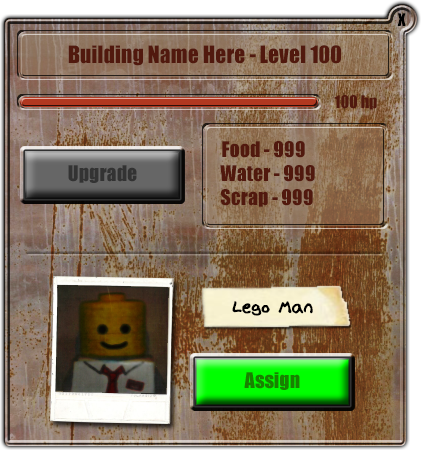
<style>
.page{position:relative;width:421px;height:450px}
.page>*{position:absolute;margin:0}
.t1{font:16px "Impact";color:#000000}
.t2{font:22px "Impact";color:#51190e}
.t3{font:16px "Impact";color:#51190e}
.t4{font:20px "Impact";color:#51190e}
.t5{font:20px "Impact";color:#333333}
.t6{font:20px "Lupas";color:#000000}
.t7{font:20px "Impact";color:#188100}
</style>
<div class="page">
<p class="t1" style="left:397px;top:13px;width:9px;height:13px">X</p>
<p class="t2" style="left:68px;top:45px;width:273px;height:21px">Building Name Here - Level 100</p>
<p class="t3" style="left:334px;top:95px;width:43px;height:15px">100 hp</p>
<p class="t4" style="left:220px;top:141px;width:95px;height:66px">Food - 999<br>Water - 999<br>Scrap - 999</p>
<p class="t5" style="left:68px;top:165px;width:69px;height:18px">Upgrade</p>
<p class="t5" style="left:68px;top:165px;width:69px;height:18px">Upgrade</p>
<p class="t6" style="left:232px;top:301px;width:81px;height:15px">Lego Man</p>
<p class="t7" style="left:244px;top:372px;width:56px;height:18px">Assign</p>
</div>
